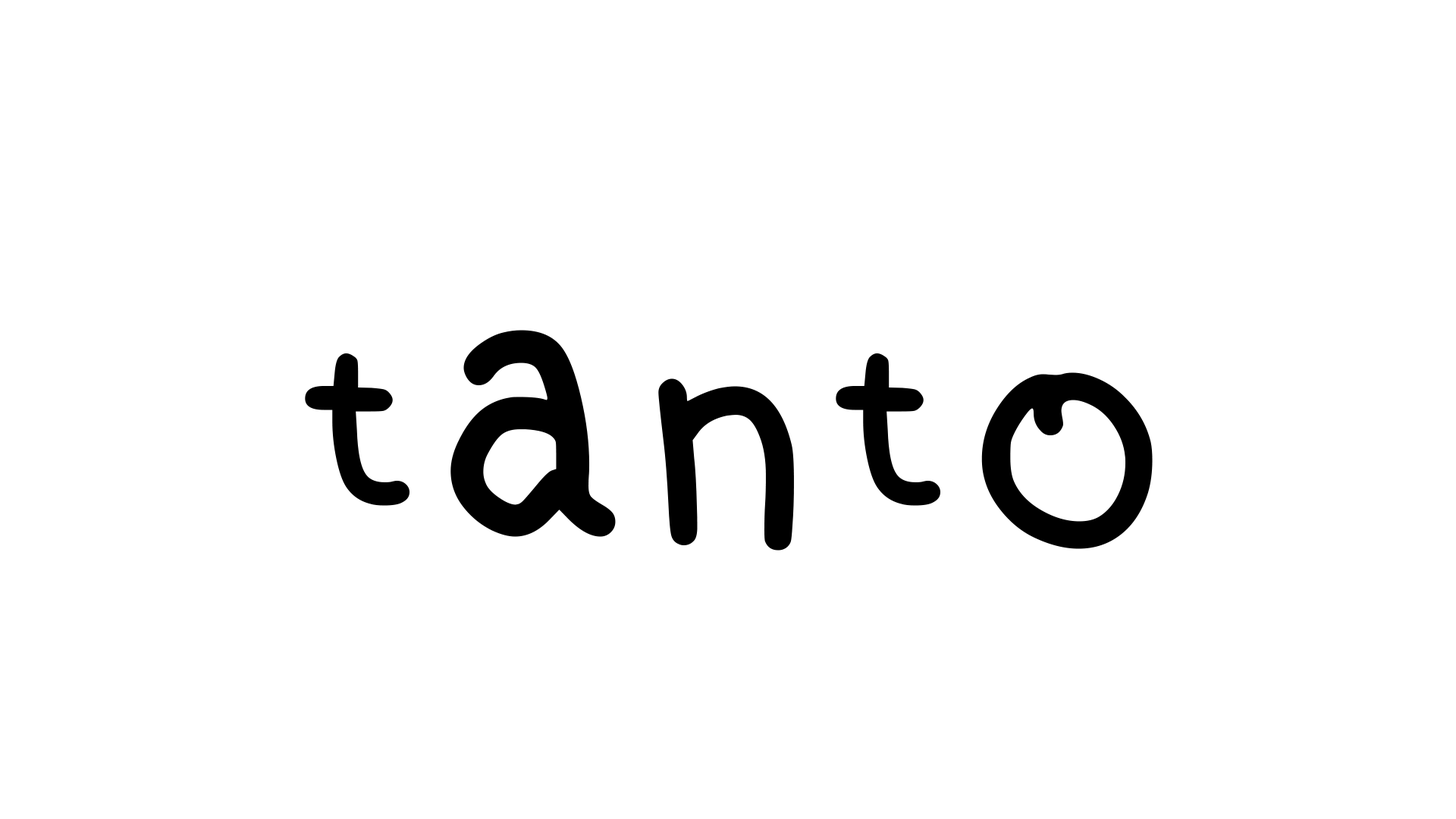
<style>
.page{position:relative;width:1456px;height:819px;background:#ffffff}
.page>*{position:absolute;margin:0}
.t1{font:379.2px "Brutal_bounce-Regular";color:#000000}
</style>
<div class="page">
<p class="t1" style="left:305px;top:330px;width:848px;height:221px">tanto</p>
</div>
